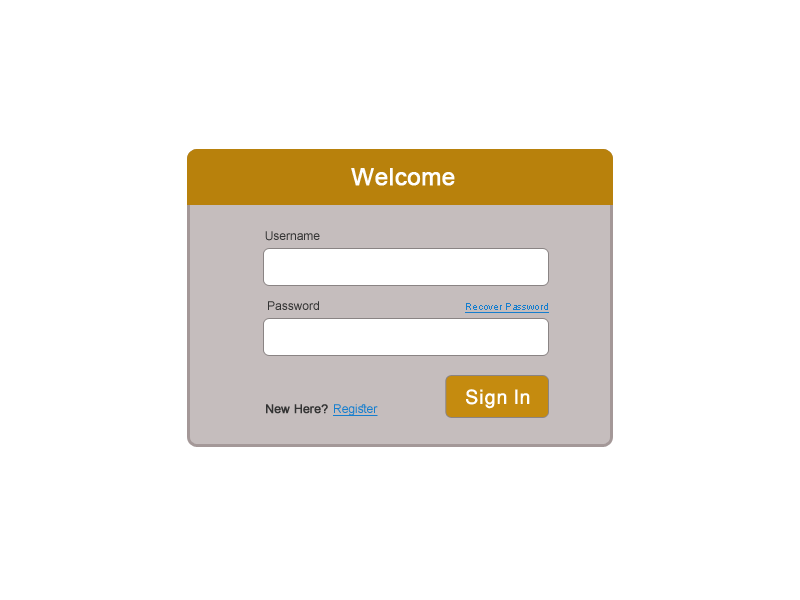
<style>
.page{position:relative;width:800px;height:600px;background:#ffffff}
.page>*{position:absolute;margin:0}
.t1{font:24px "ArialMT";color:#fefefe;font-weight:bold}
.t2{font:12px "ArialMT";color:#333333}
.t3{font:10px "ArialMT";color:#167ece;text-decoration:underline}
.t4{font:28px "WinSoftPro-Medium";color:#ffffff}
.t5{font:12px "ArialMT";color:#333333;font-weight:bold}
.t6{font:12px "ArialMT";color:#167ece;text-decoration:underline}
</style>
<div class="page">
<p class="t1" style="left:351px;top:168px;width:104px;height:18px">Welcome</p>
<p class="t2" style="left:265px;top:231px;width:55px;height:10px">Username</p>
<p class="t2" style="left:268px;top:301px;width:51px;height:9px">Password</p>
<p class="t3" style="left:465px;top:303px;width:84px;height:10px">Recover Password</p>
<p class="t4" style="left:466px;top:389px;width:64px;height:20px">Sign In</p>
<p class="t5" style="left:266px;top:404px;width:62px;height:10px">New Here?</p>
<p class="t6" style="left:333px;top:404px;width:45px;height:12px">Register</p>
</div>
